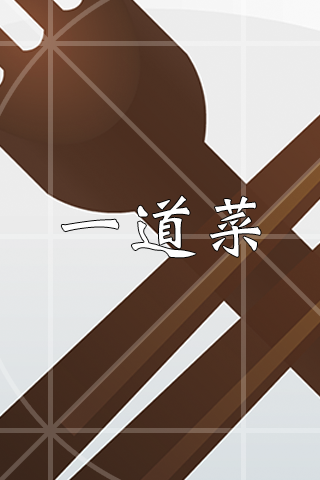
<style>
.page{position:relative;width:320px;height:480px}
.page>*{position:absolute;margin:0}
.t1{font:72px "Weibei-SC-Bold";color:#fefefe}
</style>
<div class="page">
<p class="t1" style="left:61px;top:195px;width:200px;height:63px">一道菜</p>
</div>
